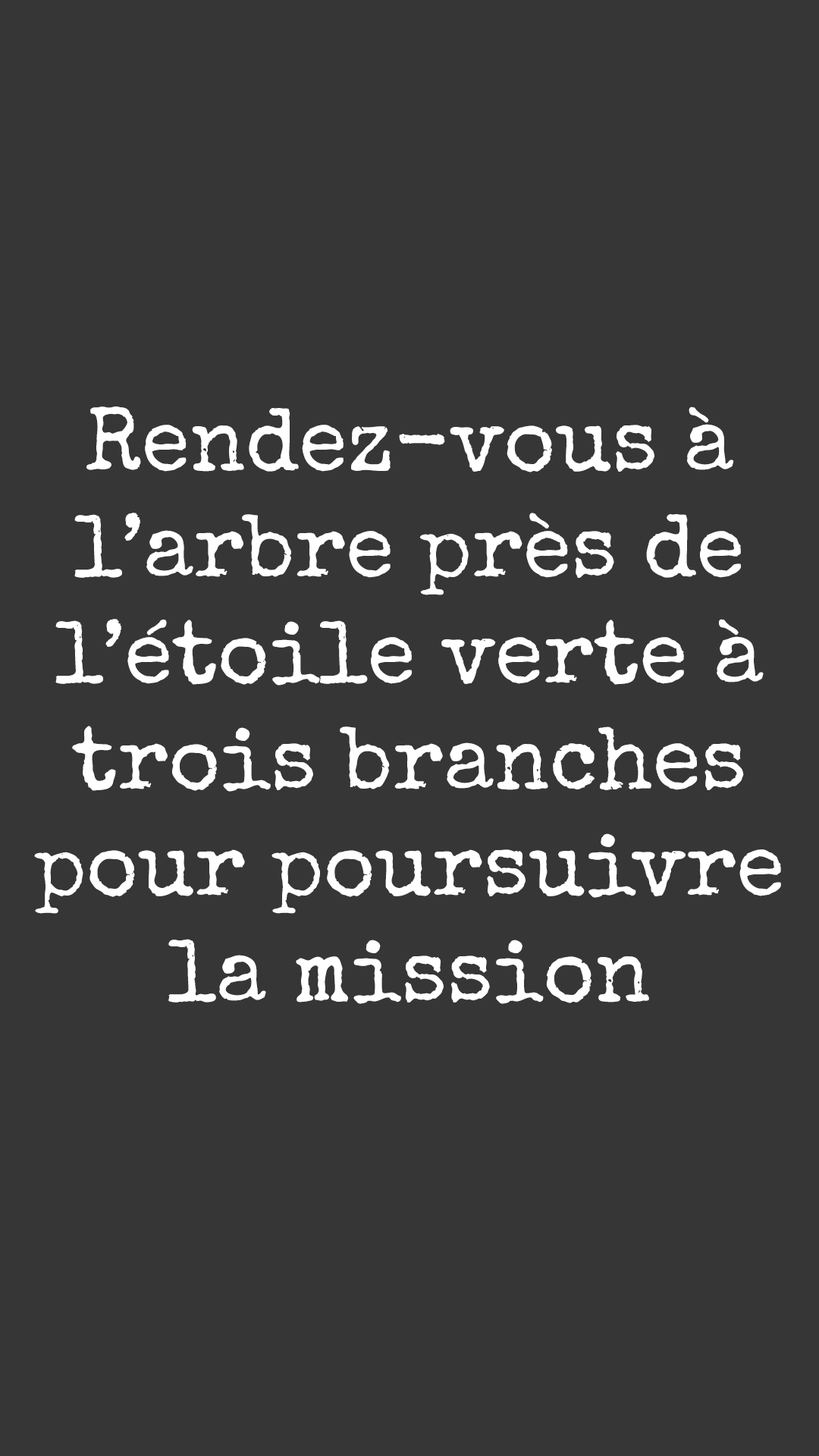
<style>
.page{position:relative;width:819px;height:1456px;background:#363636}
.page>*{position:absolute;margin:0}
.t1{font:88.5px "SpecialElite-Regular";color:#ffffff}
</style>
<div class="page">
<p class="t1" style="left:34px;top:406px;width:747px;height:598px;text-align:center">Rendez-vous à l’arbre près de l’étoile verte à trois branches pour poursuivre la mission</p>
</div>
